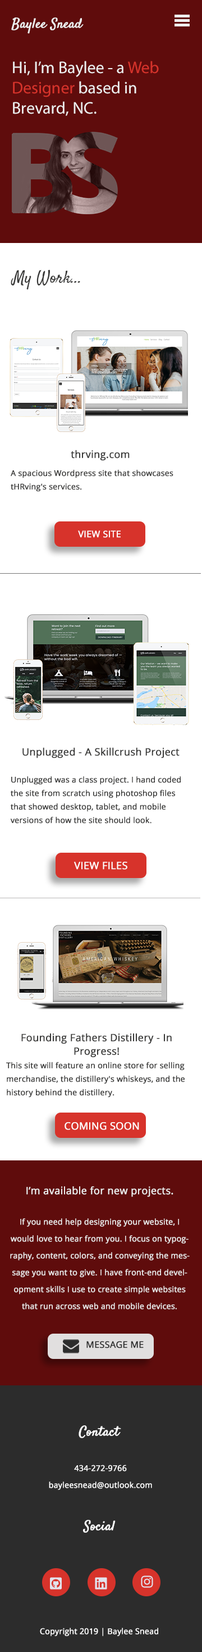
<style>
.page{position:relative;width:202px;height:1652px;background:#ffffff}
.page>*{position:absolute;margin:0}
.t1{font:13.5px "Satisfy-Regular";color:#eeeeee;font-weight:bold}
.t2{font:16.9px/20.2px "MyriadPro-Regular";color:#eeeeee}
.t3{font:16.9px/20.2px "MyriadPro-Regular";color:#d7332b}
.t4{font:16.9px "Satisfy-Regular";color:#383837}
.t5{font:7.9px/9px "OpenSans";color:#383837;font-weight:bold}
.t6{font:10.1px/9px "OpenSans";color:#383837;font-weight:bold}
.t7{font:7.9px/13.5px "OpenSans";color:#383837;font-weight:bold}
.t8{font:9px "OpenSans";color:#ffffff;font-weight:bold}
.t9{font:10.1px/13.5px "OpenSans";color:#383837;font-weight:bold}
.t10{font:10.1px "OpenSans";color:#ffffff;font-weight:bold}
.t11{font:7.9px/16.9px "OpenSans";color:#ece8e8;font-weight:bold}
.t12{font:10.1px/27px "OpenSans";color:#eeeeee;font-weight:bold}
.t13{font:9px "OpenSans";color:#2c2c2c;font-weight:bold}
.t14{font:13.5px "Satisfy-Regular";color:#ffffff;font-weight:bold}
.t15{font:7.9px/16.9px "OpenSans";color:#ffffff;font-weight:bold}
.t16{font:7.9px "OpenSans";color:#ffffff;font-weight:bold}
</style>
<div class="page">
<p class="t1" style="left:11px;top:17px;width:73px;height:17px">Baylee Snead</p>
<p class="t2" style="left:13px;top:61px;width:146px;height:55px">Hi, I’m Baylee - a <span class="t3">Web Designer</span> based in Brevard, NC.</p>
<p class="t4" style="left:11px;top:269px;width:69px;height:21px">My Work...</p>
<p class="t5" style="left:11px;top:450px;width:163px;height:42px;text-align:center"><span class="t6">thrving.com<br><br></span>A spacious Wordpress site that showcases tHRving's ser<span class="t7">vices.</span></p>
<p class="t8" style="left:78px;top:530px;width:43px;height:8px">VIEW SITE</p>
<p class="t7" style="left:10px;top:748px;width:171px;height:76px;text-align:center"><span class="t9">Unplugged - A Skillcrush Project<br><br></span>Unplugged was a class project. I hand coded the site from scratch using photoshop files that showed desktop, tablet, and mobile versions of how the site should look.</p>
<p class="t10" style="left:74px;top:862px;width:54px;height:8px">VIEW FILES</p>
<p class="t7" style="left:6px;top:1033px;width:179px;height:64px;text-align:center"><span class="t9">Founding Fathers Distillery - In Progress!<br></span>This site will feature an online store for selling merchandise, the distillery's whiskeys, and the history behind the distillery.</p>
<p class="t10" style="left:65px;top:1122px;width:75px;height:8px">COMING SOON</p>
<p class="t11" style="left:10px;top:1186px;width:180px;height:124px;text-align:center"><span class="t12">I’m available for new projects.<br><br></span>If you need help designing your website, I would love to hear from you. I focus on typography, content, colors, and conveying the message you want to give. I have front-end development skills I use to create simple websites that run across web and mobile devices.</p>
<p class="t13" style="left:87px;top:1341px;width:57px;height:7px">MESSAGE ME</p>
<p class="t14" style="left:79px;top:1425px;width:43px;height:13px">Contact</p>
<p class="t15" style="left:49px;top:1465px;width:103px;height:25px;text-align:center">434-272-9766<br>bayleesnead@outlook.com</p>
<p class="t14" style="left:83px;top:1520px;width:33px;height:13px">Social</p>
<p class="t16" style="left:40px;top:1628px;width:119px;height:8px">Copyright 2019 | Baylee Snead</p>
</div>
